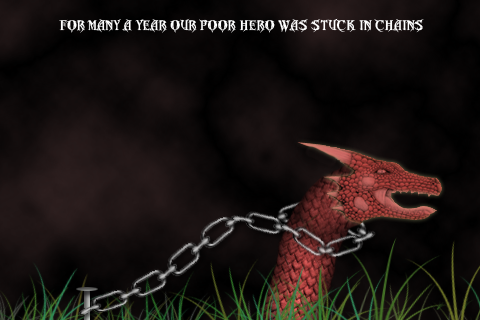
<style>
.page{position:relative;width:480px;height:320px}
.page>*{position:absolute;margin:0}
.t1{font:12.5px "MetalMacabre";color:#ffffff}
</style>
<div class="page">
<p class="t1" style="left:59px;top:18px;width:365px;height:15px">for many a year our poor hero was stuck in chains</p>
</div>
